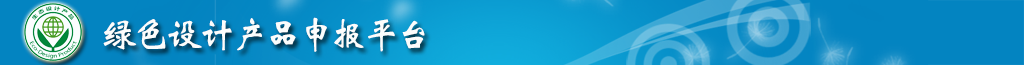
<style>
.page{position:relative;width:1024px;height:65px;background:#0384c1}
.page>*{position:absolute;margin:0}
.t1{font:37.3px "STXinwei";letter-spacing:-0.075em;color:#fcfdfc;scale:0.95 1}
</style>
<div class="page">
<p class="t1" style="left:103px;top:17px;width:322px;height:35px">绿色设计产品申报平台</p>
</div>
